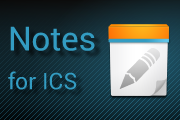
<style>
.page{position:relative;width:180px;height:120px}
.page>*{position:absolute;margin:0}
.t1{font:33.3px "Roboto-Regular";color:#339cc2}
.t2{font:23px "Roboto-Regular";color:#339cc2}
</style>
<div class="page">
<p class="t1" style="left:10px;top:26px;width:85px;height:25px">Notes</p>
<p class="t2" style="left:8px;top:71px;width:69px;height:19px">for ICS</p>
</div>
